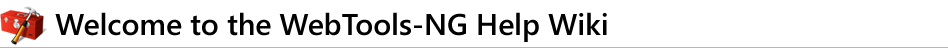
<style>
.page{position:relative;width:948px;height:48px;background:#ffffff}
.page>*{position:absolute;margin:0}
.t1{font:30px "SegoeUI-Semibold";color:#000000}
</style>
<div class="page">
<p class="t1" style="left:55px;top:12px;width:552px;height:30px">Welcome to the WebTools-NG Help Wiki</p>
</div>
